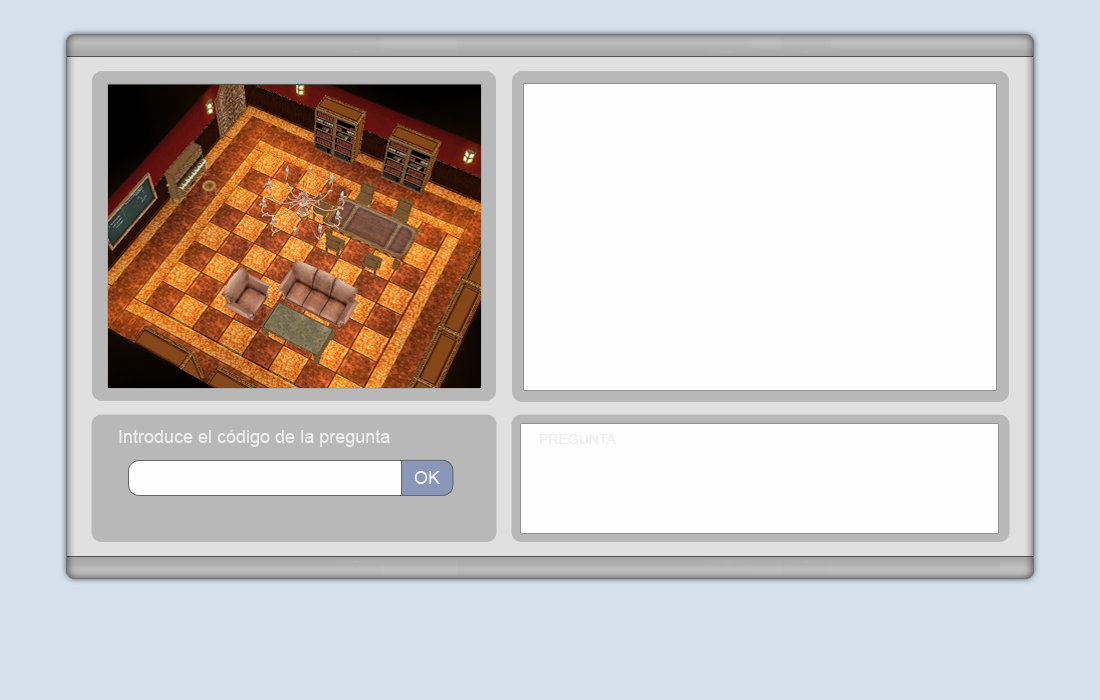
<style>
.page{position:relative;width:1100px;height:700px;background:#fefefe}
.page>*{position:absolute;margin:0}
.t1{font:18px "ArialMT";color:#ededed}
.t2{font:14px "ArialMT";color:#ededed}
</style>
<div class="page">
<p class="t1" style="left:119px;top:430px;width:271px;height:17px">Introduce el código de la pregunta</p>
<p class="t2" style="left:540px;top:434px;width:76px;height:10px">PREGUNTA</p>
<p class="t1" style="left:414px;top:471px;width:26px;height:13px">OK</p>
</div>
